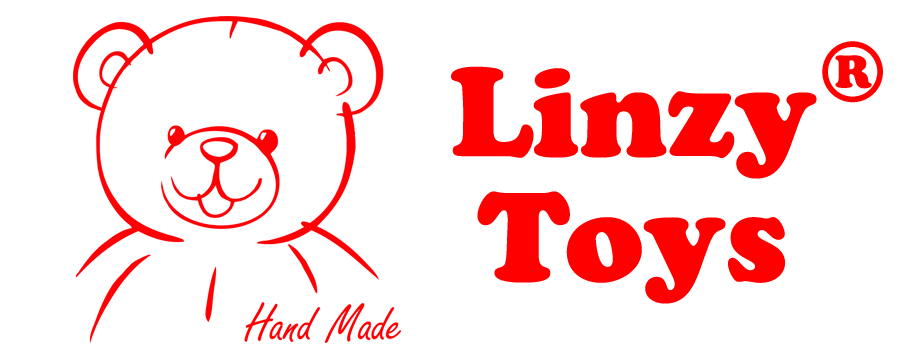
<style>
.page{position:relative;width:900px;height:360px;background:#ffffff}
.page>*{position:absolute;margin:0}
.t1{font:83.3px "CooperBlackStd";color:#ff0000}
.t2{font:125px/125px "CooperBlackStd";color:#ff0000}
</style>
<div class="page">
<p class="t1" style="left:822px;top:41px;width:61px;height:62px">®</p>
<p class="t2" style="left:451px;top:66px;width:366px;height:238px;text-align:center">Linzy<br>Toys</p>
</div>
